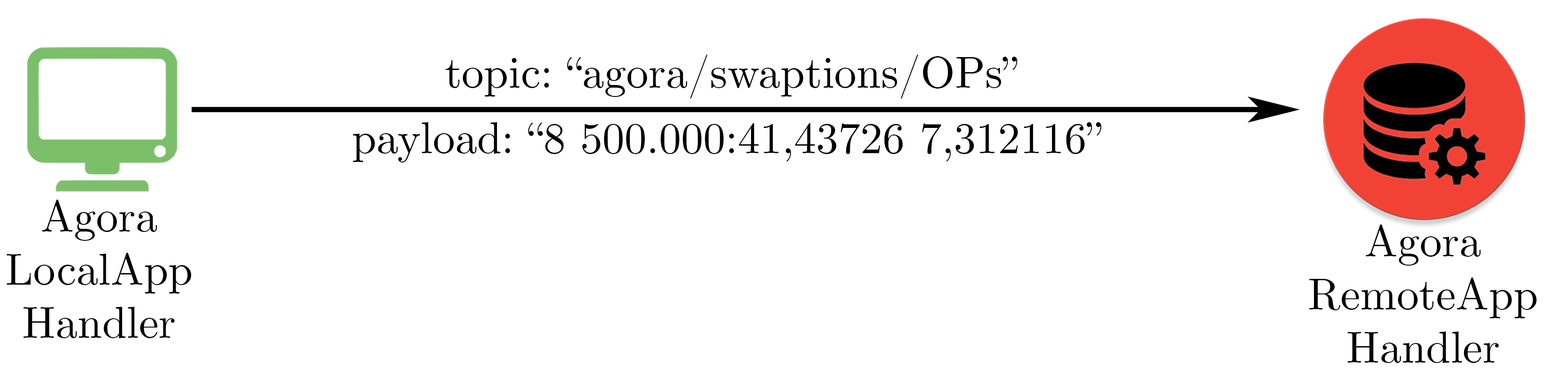
<style>
.page{position:relative;width:1568px;height:382px;background:#ffffff}
.page>*{position:absolute;margin:0}
.t1{font:44.3px "CMUSerif-Roman";color:#000000}
</style>
<div class="page">
<p class="t1" style="left:445px;top:54px;width:572px;height:45px">topic: “agora/swaptions/OPs”</p>
<p class="t1" style="left:353px;top:122px;width:749px;height:40px">payload: “8 500.000:41,43726 7,312116”</p>
<p class="t1" style="left:7px;top:200px;width:184px;height:138px;text-align:center">Agora<br>LocalApp<br>Handler</p>
<p class="t1" style="left:1309px;top:224px;width:228px;height:139px;text-align:center">Agora<br>RemoteApp<br>Handler</p>
</div>
